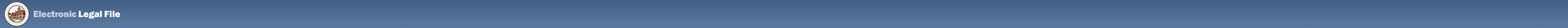
<style>
.page{position:relative;width:1568px;height:28px}
.page>*{position:absolute;margin:0}
.t1{font:9.4px "FranklinGothic-Heavy";letter-spacing:-0.015em;color:#c1cee1}
.t2{font:9.4px "FranklinGothic-Heavy";color:#ffffff}
.t3{font:9.4px "FranklinGothic-Heavy";letter-spacing:-0.01em;color:#ffffff}
</style>
<div class="page">
<p class="t1" style="left:33px;top:10px;width:87px;height:9px">Electronic <span class="t2">L</span><span class="t3">ega</span><span class="t2">l File</span></p>
</div>
